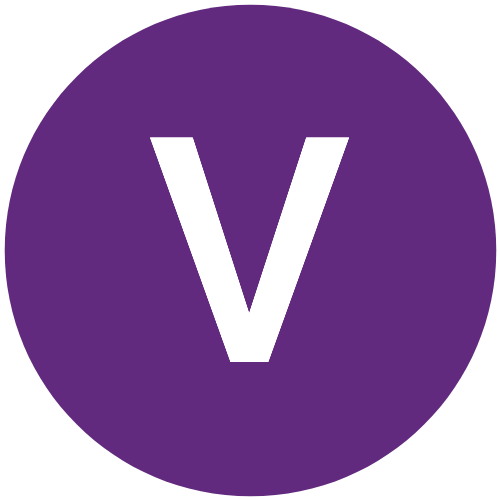
<style>
.page{position:relative;width:500px;height:500px;background:#622a7f}
.page>*{position:absolute;margin:0}
.t1{font:315.8px "Roboto-Medium";color:#ffffff}
</style>
<div class="page">
<p class="t1" style="left:150px;top:137px;width:199px;height:225px">V</p>
</div>
